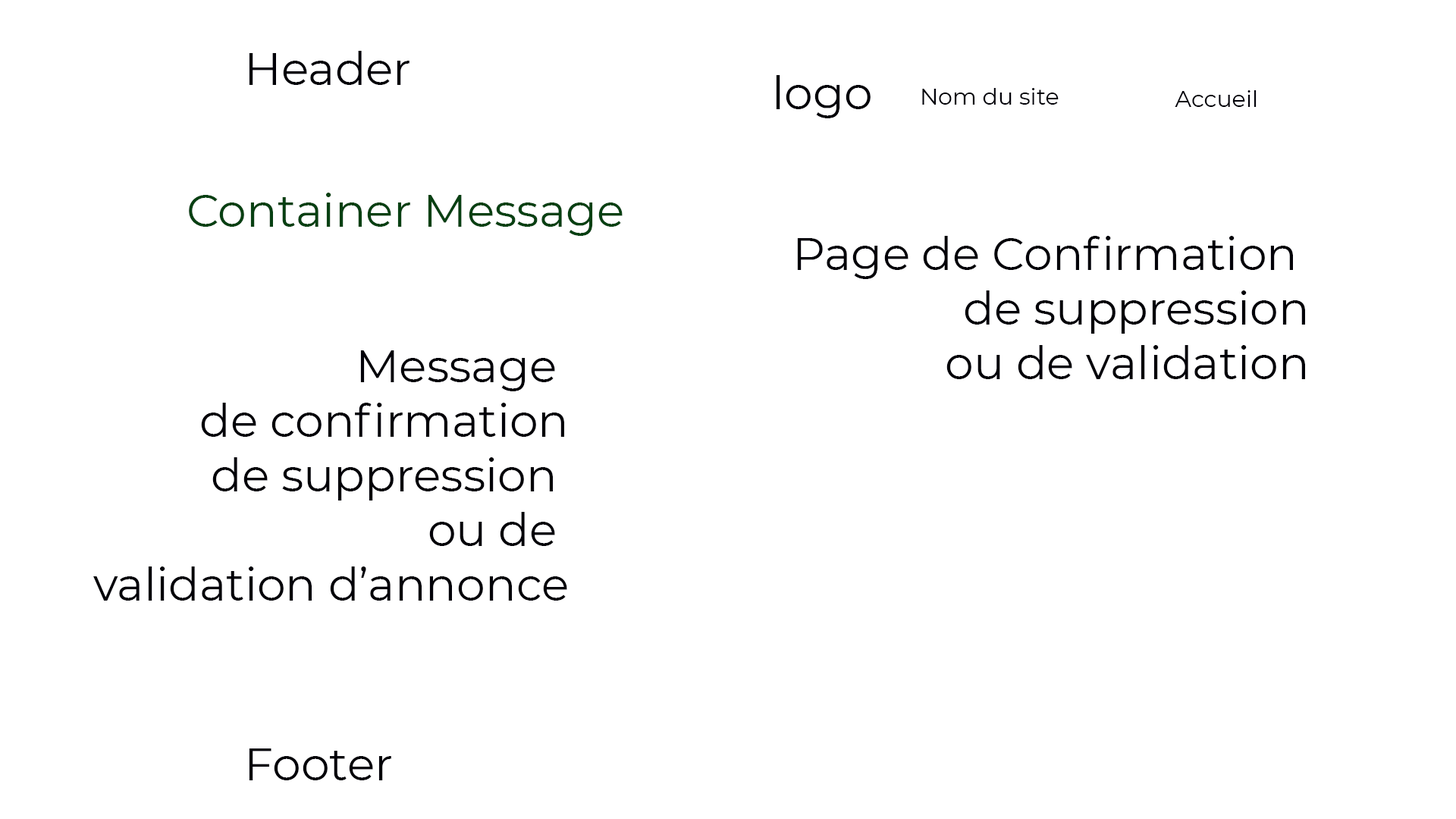
<style>
.page{position:relative;width:1456px;height:819px;background:#ffffff}
.page>*{position:absolute;margin:0}
.t1{font:45.5px "Montserrat-Regular";color:#010008}
.t2{font:22.7px "Montserrat-Regular";color:#010008}
.t3{font:45.5px "Montserrat-Regular";color:#074012}
</style>
<div class="page">
<p class="t1" style="left:249px;top:51px;width:160px;height:34px">Header</p>
<p class="t1" style="left:776px;top:75px;width:95px;height:43px">logo</p>
<p class="t2" style="left:922px;top:88px;width:137px;height:17px">Nom du site</p>
<p class="t2" style="left:1175px;top:90px;width:82px;height:17px">Accueil</p>
<p class="t3" style="left:189px;top:193px;width:434px;height:43px">Container Message</p>
<p class="t1" style="left:797px;top:236px;width:508px;height:143px;text-align:right">Page de Confirmation <br>de suppression<br>ou de validation</p>
<p class="t1" style="left:93px;top:350px;width:474px;height:251px;text-align:right">Message <br>de confirmation<br> de suppression <br>ou de <br>validation d’annonce</p>
<p class="t1" style="left:249px;top:748px;width:142px;height:32px">Footer</p>
</div>
